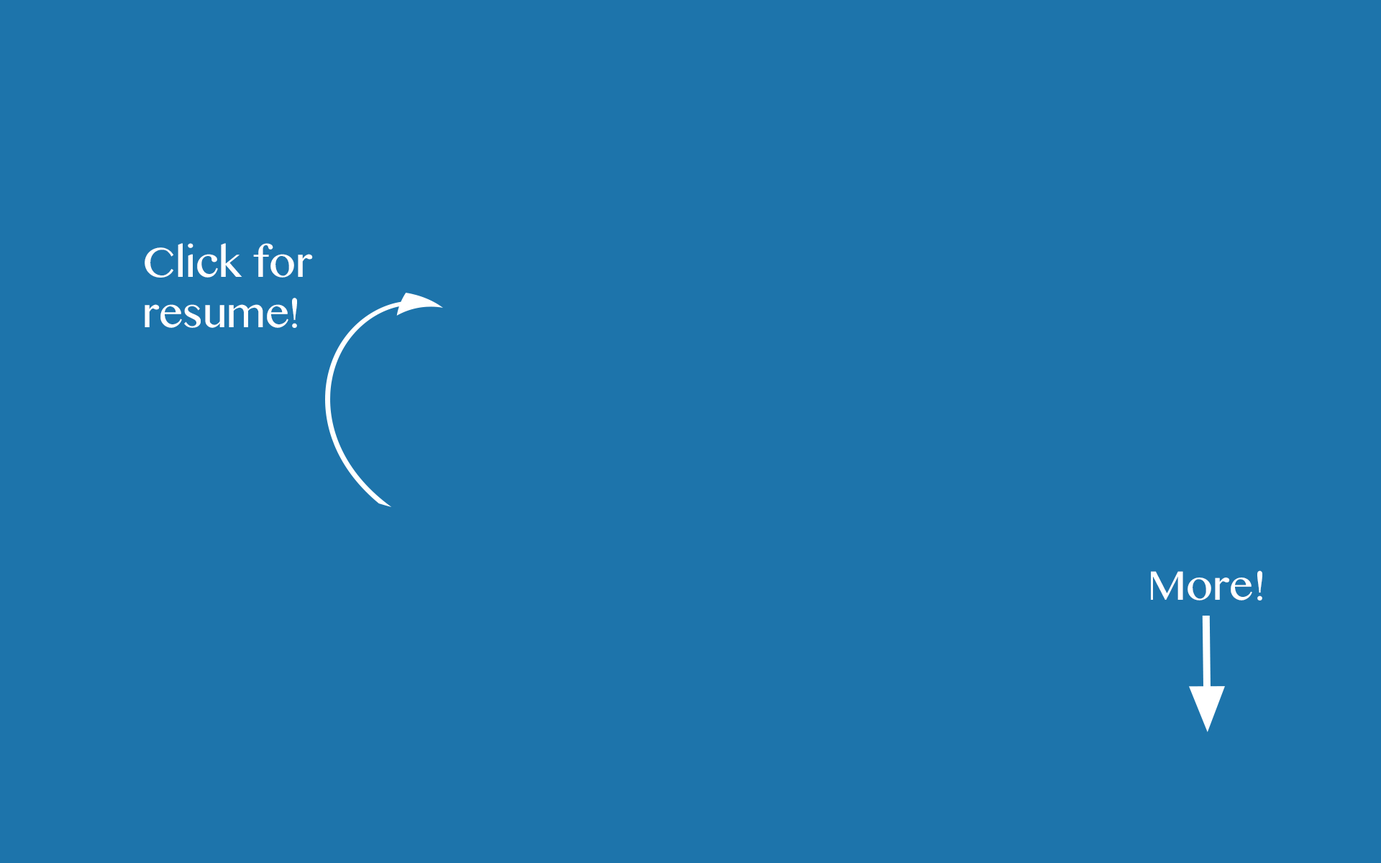
<style>
.page{position:relative;width:1381px;height:863px;background:#1d74ab}
.page>*{position:absolute;margin:0}
.t1{font:42.1px "MalayalamMN";color:#ffffff}
.t2{font:41.6px "MalayalamMN";color:#ffffff}
</style>
<div class="page">
<p class="t1" style="left:145px;top:243px;width:168px;height:85px">Click for <br>resume!</p>
<p class="t2" style="left:1151px;top:570px;width:112px;height:31px">More!</p>
</div>
